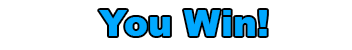
<style>
.page{position:relative;width:352px;height:50px;background:#ffffff}
.page>*{position:absolute;margin:0}
.t1{font:36px "Arial-Black";color:#00a8ff}
</style>
<div class="page">
<p class="t1" style="left:99px;top:10px;width:168px;height:26px">You Win!</p>
</div>
